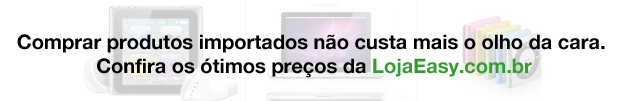
<style>
.page{position:relative;width:623px;height:101px;background:#ffffff}
.page>*{position:absolute;margin:0}
.t1{font:20px "HelveticaNeue-Bold";color:#000000}
.t2{font:20px "HelveticaNeue-Bold";color:#319f2e}
</style>
<div class="page">
<p class="t1" style="left:17px;top:34px;width:588px;height:44px;text-align:center">Comprar produtos importados não custa mais o olho da cara. <br>Confira os ótimos preços da <span class="t2">LojaEasy.com.br</span></p>
</div>
